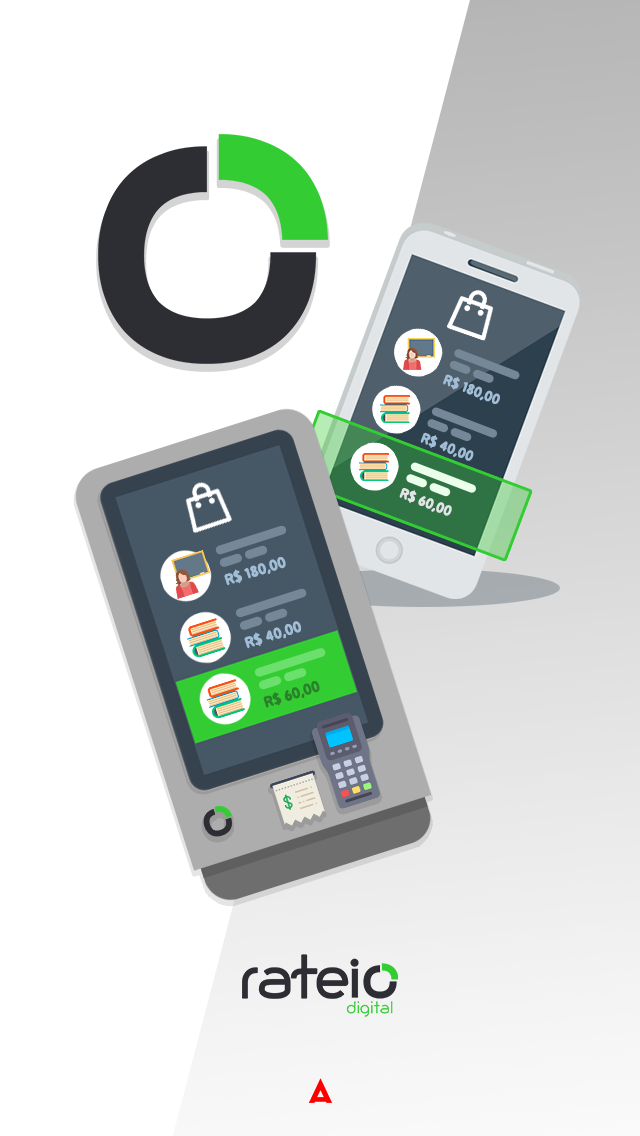
<style>
.page{position:relative;width:640px;height:1136px;background:#ffffff}
.page>*{position:absolute;margin:0}
.t1{font:13.5px "BPreplay-Bold";color:#a1bed6}
.t2{font:13.5px "BPreplay-Bold";color:#e2e5e7}
.t3{font:14.3px "BPreplay-Bold";color:#a1bed6}
.t4{font:14.3px "BPreplay-Bold";color:#2b802b}
</style>
<div class="page">
<p class="t1" style="left:443px;top:374px;width:57px;height:30px;rotate:21deg">R$ 180,00</p>
<p class="t1" style="left:420px;top:432px;width:54px;height:29px;rotate:21deg">R$ 40,00</p>
<p class="t2" style="left:399px;top:488px;width:53px;height:28px;rotate:21deg">R$ 60,00</p>
<p class="t3" style="left:224px;top:557px;width:62px;height:29px;rotate:-18deg">R$ 180,00</p>
<p class="t3" style="left:244px;top:621px;width:57px;height:28px;rotate:-18deg">R$ 40,00</p>
<p class="t4" style="left:263px;top:681px;width:57px;height:27px;rotate:-18deg">R$ 60,00</p>
</div>
